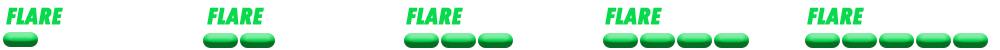
<style>
.page{position:relative;width:1000px;height:50px;background:#ffffff}
.page>*{position:absolute;margin:0}
.t1{font:24.9px "TwCenMT-CondensedExtraBold";letter-spacing:-0.02em;color:#08d94d;text-transform:uppercase;font-weight:bold;font-style:italic}
</style>
<div class="page">
<p class="t1" style="left:6px;top:7px;width:57px;height:18px">FLARE</p>
<p class="t1" style="left:207px;top:7px;width:57px;height:18px">FLARE</p>
<p class="t1" style="left:406px;top:7px;width:57px;height:18px">FLARE</p>
<p class="t1" style="left:605px;top:7px;width:57px;height:18px">FLARE</p>
<p class="t1" style="left:807px;top:7px;width:57px;height:18px">FLARE</p>
</div>
